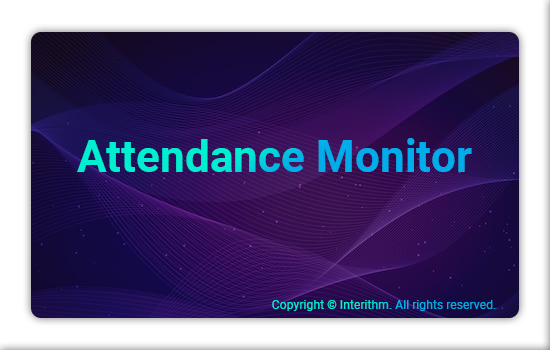
<style>
.page{position:relative;width:550px;height:350px}
.page>*{position:absolute;margin:0}
.t1{font:44.2px "Roboto-Bold"}
.t2{font:12.2px "Roboto-Regular"}
</style>
<div class="page">
<p class="t1" style="left:77px;top:138px;width:395px;height:34px">Attendance Monitor</p>
<p class="t2" style="left:272px;top:300px;width:224px;height:11px">Copyright © Interithm. All rights reserved.</p>
</div>
